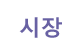
<style>
.page{position:relative;width:82px;height:51px;background:#ffffff}
.page>*{position:absolute;margin:0}
.t1{font:22px "MalgunGothicBold";color:#6861a3}
</style>
<div class="page">
<p class="t1" style="left:19px;top:17px;width:43px;height:21px">시장</p>
</div>
